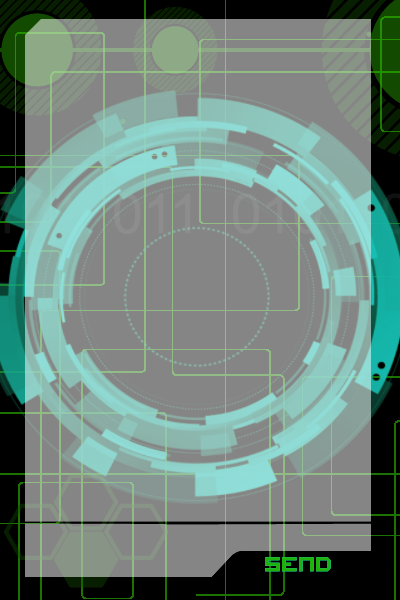
<style>
.page{position:relative;width:400px;height:600px;background:#858585}
.page>*{position:absolute;margin:0}
.t1{font:37.6px "imagine-font";color:#1fb20f;font-weight:bold}
</style>
<div class="page">
<p class="t1" style="left:265px;top:557px;width:66px;height:15px">Send</p>
</div>
